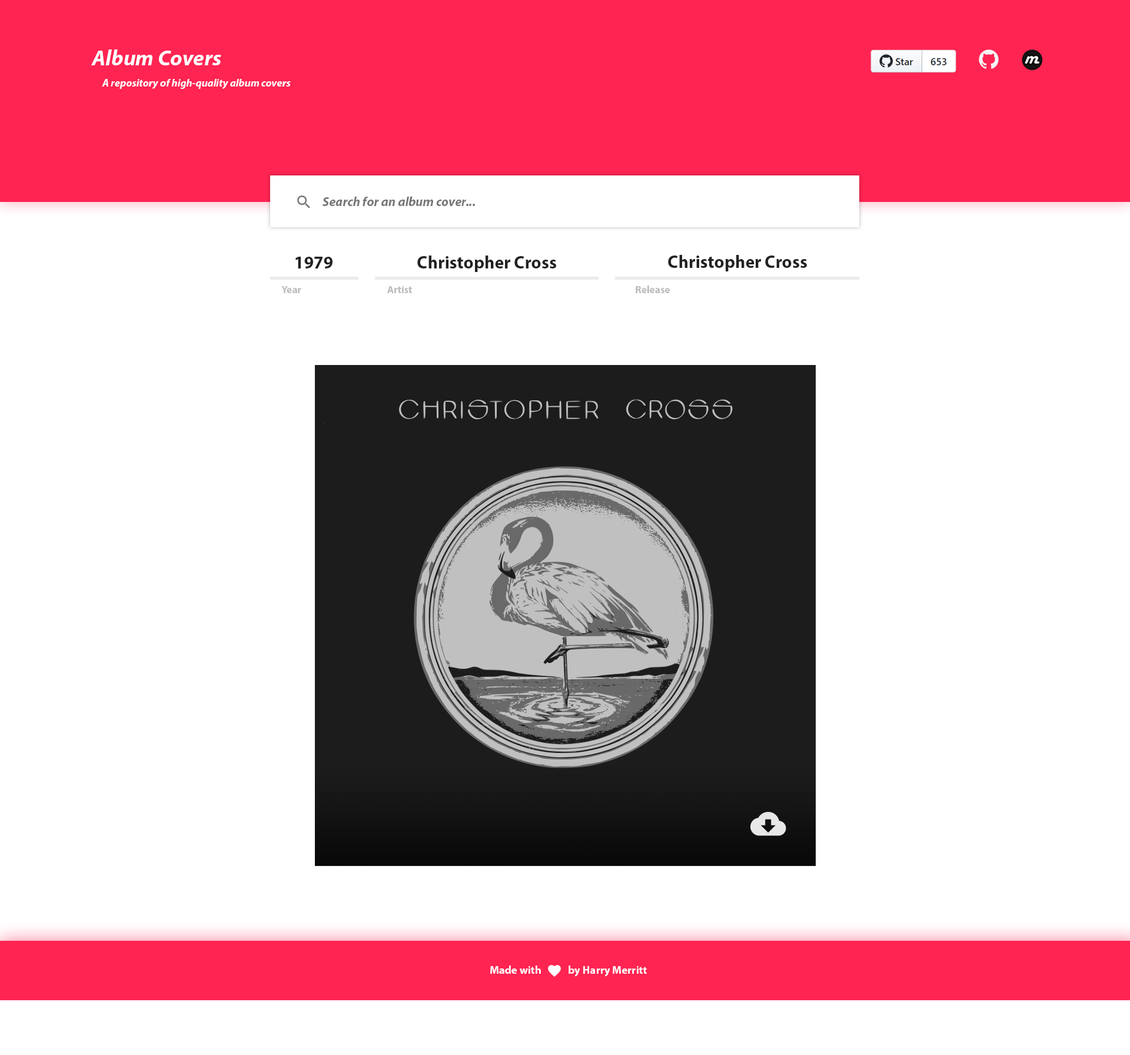
<style>
.page{position:relative;width:1130px;height:1055px;background:#ffffff}
.page>*{position:absolute;margin:0}
.t1{font:21.8px "MyriadPro-BoldIt";color:#ffffff}
.t2{font:10.6px "MyriadPro-BoldIt";color:#ffffff}
.t3{font:12.9px "MyriadPro-BoldIt";color:#777777}
.t4{font:17.7px "MyriadPro-Bold";color:#222222}
.t5{font:10.2px "MyriadPro-Bold";color:#bcbcbc}
.t6{font:11px "MyriadPro-Bold";color:#ffffff}
</style>
<div class="page">
<p class="t1" style="left:91px;top:49px;width:130px;height:16px">Album Covers</p>
<p class="t2" style="left:102px;top:79px;width:189px;height:10px">A repository of high-quality album covers</p>
<p class="t3" style="left:323px;top:197px;width:152px;height:9px">Search for an album cover...</p>
<p class="t4" style="left:296px;top:257px;width:37px;height:11px">1979</p>
<p class="t4" style="left:417px;top:255px;width:139px;height:17px">Christopher Cross</p>
<p class="t4" style="left:668px;top:255px;width:139px;height:16px">Christopher Cross</p>
<p class="t5" style="left:281px;top:286px;width:20px;height:7px">Year</p>
<p class="t5" style="left:387px;top:286px;width:25px;height:7px">Artist</p>
<p class="t5" style="left:636px;top:286px;width:34px;height:7px">Release</p>
<p class="t6" style="left:490px;top:965px;width:157px;height:12px">Made with            by Harry Merritt</p>
</div>
